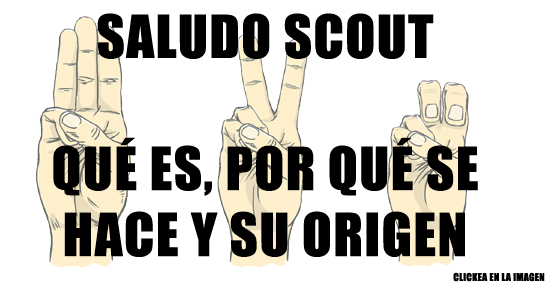
<style>
.page{position:relative;width:550px;height:287px;background:#ffffff}
.page>*{position:absolute;margin:0}
.t1{font:55px "Impact";letter-spacing:0.025em;color:#000000;text-transform:uppercase}
.t2{font:10px "Impact";letter-spacing:0.025em;color:#000000;text-transform:uppercase}
</style>
<div class="page">
<p class="t1" style="left:53px;top:13px;width:425px;height:244px;text-align:center">SALUDO SCOUT<br><br>Qué es, por qué se<br>hace y su origen</p>
<p class="t2" style="left:453px;top:272px;width:92px;height:10px">clickea en la imagen</p>
</div>
